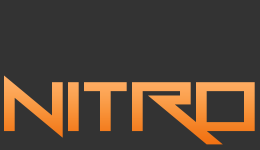
<style>
.page{position:relative;width:260px;height:150px;background:#333333}
.page>*{position:absolute;margin:0}
.t1{font:142px "Gang-Wolfik";scale:1.2 1}
</style>
<div class="page">
<p class="t1" style="left:4px;top:75px;width:251px;height:70px">NITRO</p>
</div>
